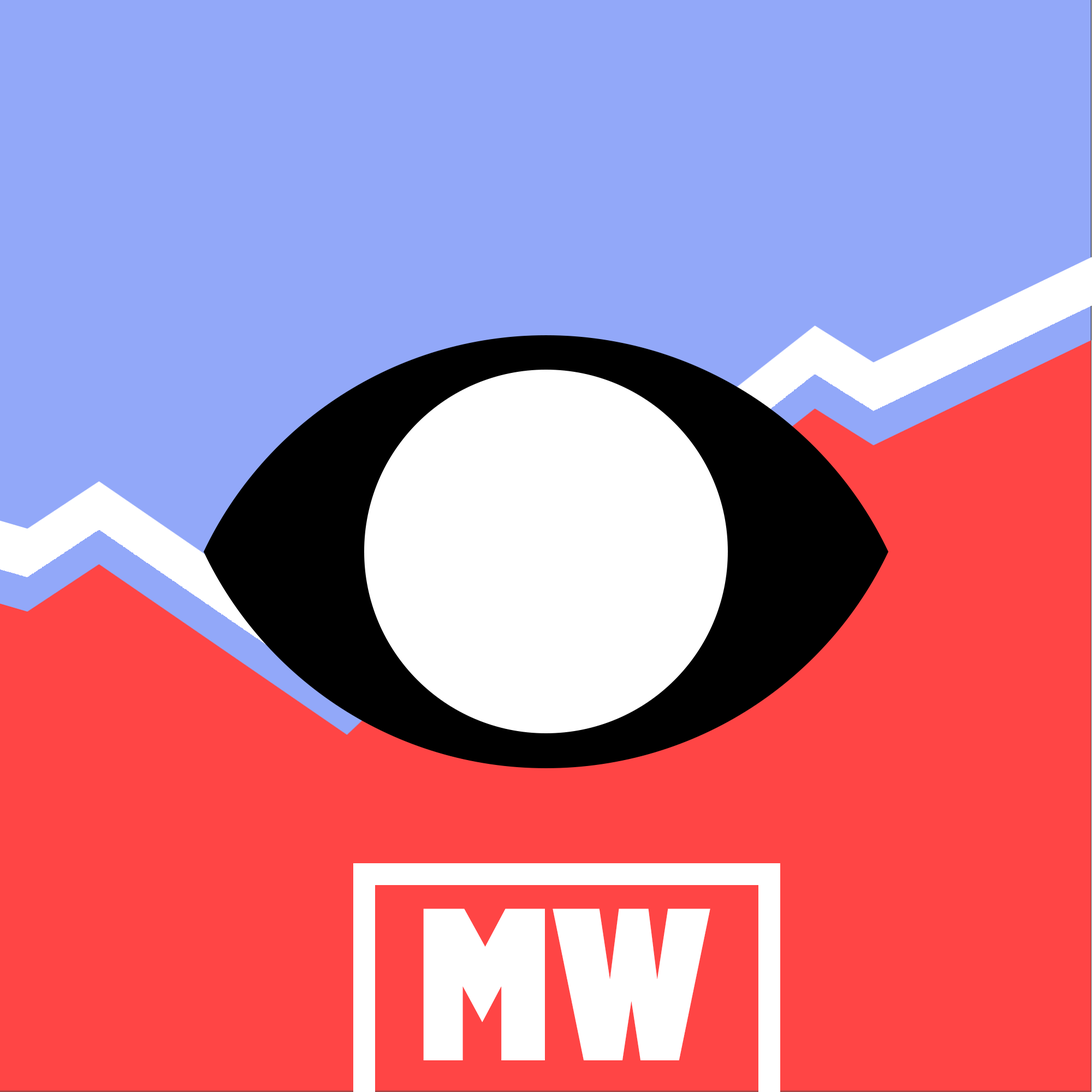
<style>
.page{position:relative;width:1092px;height:1092px;background:#ff4545}
.page>*{position:absolute;margin:0}
.t1{font:209.1px "AzoSansUber-Regular";color:#ffffff;scale:0.7 1}
</style>
<div class="page">
<p class="t1" style="left:423px;top:909px;width:287px;height:151px">MW</p>
</div>
